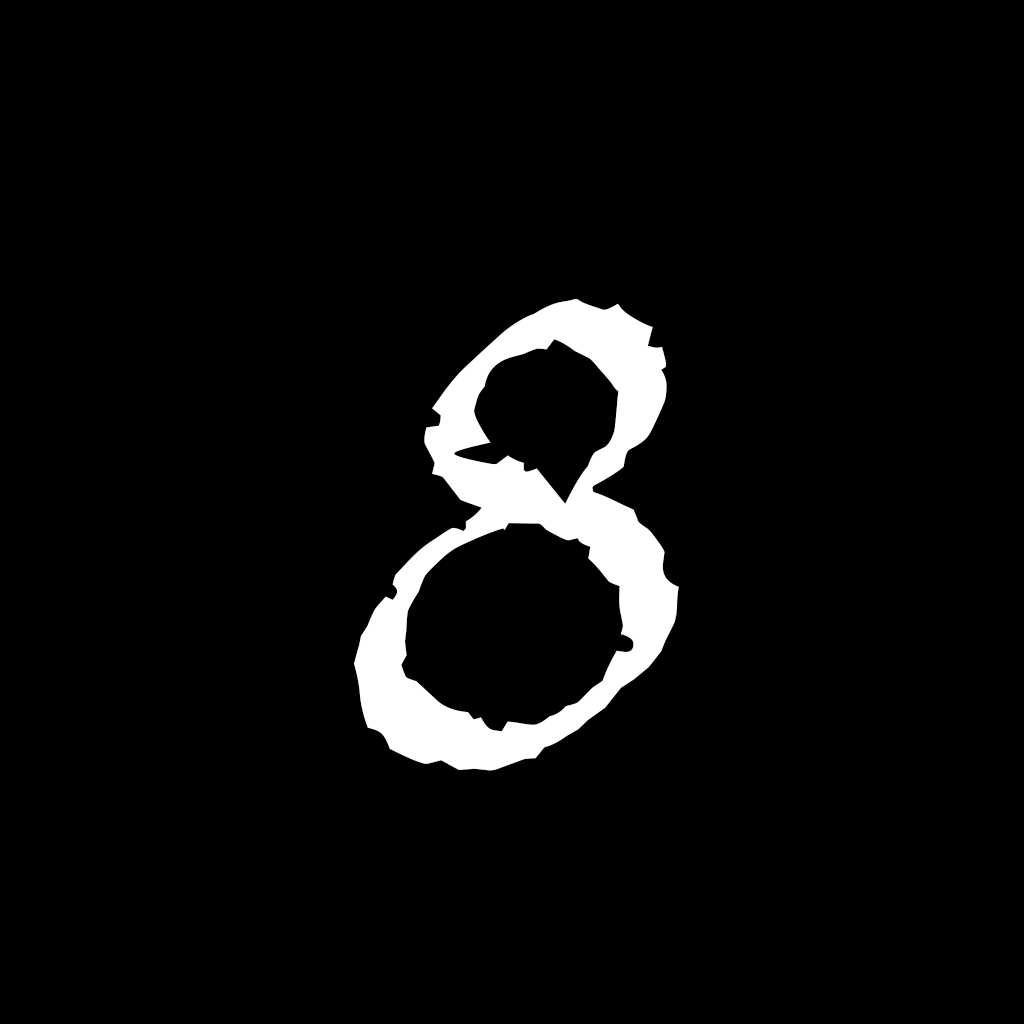
<style>
.page{position:relative;width:1024px;height:1024px;background:#000000}
.page>*{position:absolute;margin:0}
.t1{font:833.3px "Papyrus-Regular";color:#ffffff}
</style>
<div class="page">
<p class="t1" style="left:354px;top:298px;width:325px;height:473px">8</p>
</div>
